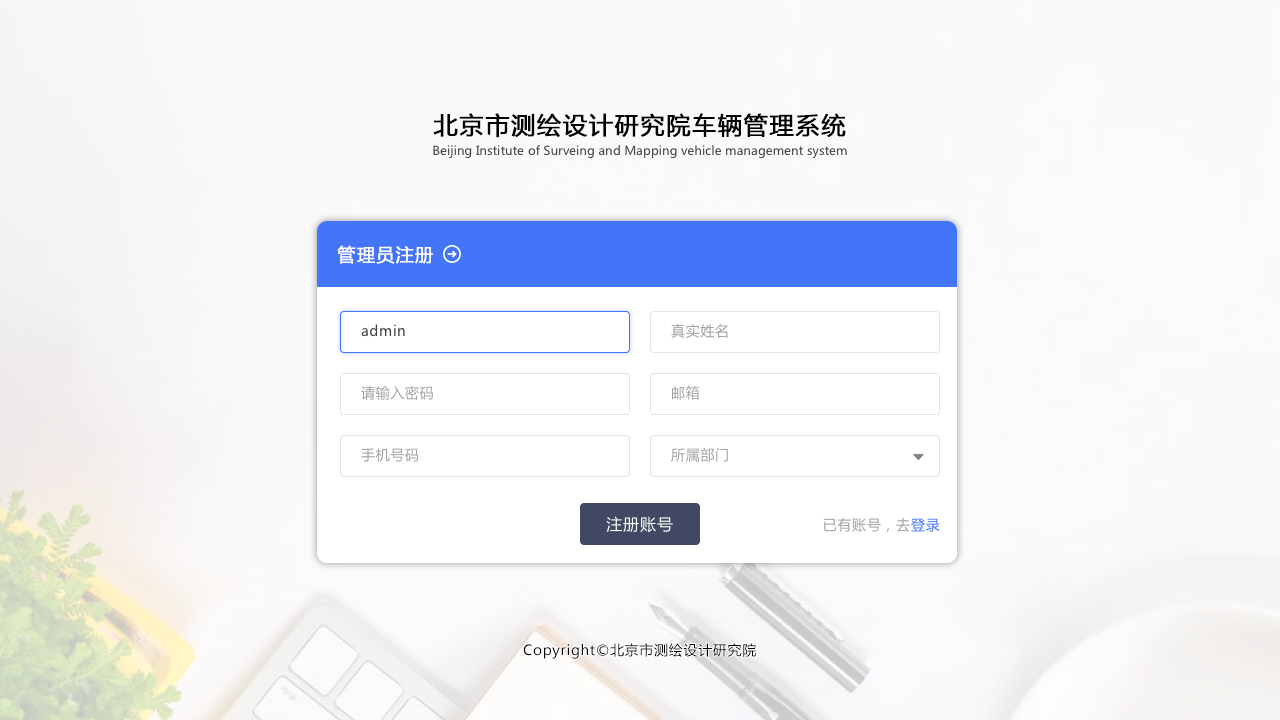
<style>
.page{position:relative;width:1280px;height:720px}
.page>*{position:absolute;margin:0}
.t1{font:24px "MicrosoftYaHei";letter-spacing:0.05em;color:#010101;font-weight:bold}
.t2{font:12.3px "MicrosoftYaHei";color:#454545}
.t3{font:18px "MicrosoftYaHei";letter-spacing:0.05em;color:#ffffff;font-weight:bold}
.t4{font:14px "MicrosoftYaHei";letter-spacing:0.05em;color:#444444}
.t5{font:14px "MicrosoftYaHei";letter-spacing:0.05em;color:#a2a2a2}
.t6{font:16px "MicrosoftYaHei";letter-spacing:0.05em;color:#ffffff}
.t7{font:14px "MicrosoftYaHei";letter-spacing:0.05em;color:#4275f8}
.t8{font:14px "MicrosoftYaHei";letter-spacing:0.05em;color:#000000}
</style>
<div class="page">
<p class="t1" style="left:433px;top:113px;width:413px;height:25px">北京市测绘设计研究院车辆管理系统</p>
<p class="t2" style="left:433px;top:145px;width:414px;height:14px">Beijing Institute of Surveing and Mapping vehicle management system</p>
<p class="t3" style="left:337px;top:245px;width:96px;height:19px">管理员注册</p>
<p class="t4" style="left:361px;top:324px;width:44px;height:13px">admin</p>
<p class="t5" style="left:671px;top:324px;width:57px;height:14px">真实姓名</p>
<p class="t5" style="left:361px;top:386px;width:72px;height:14px">请输入密码</p>
<p class="t5" style="left:672px;top:386px;width:28px;height:14px">邮箱</p>
<p class="t5" style="left:361px;top:448px;width:58px;height:14px">手机号码</p>
<p class="t5" style="left:671px;top:448px;width:57px;height:14px">所属部门</p>
<p class="t6" style="left:606px;top:516px;width:67px;height:17px">注册账号</p>
<p class="t5" style="left:823px;top:518px;width:117px;height:14px">已有账号，去<span class="t7">登录</span></p>
<p class="t8" style="left:523px;top:643px;width:233px;height:16px">Copyright©北京市测绘设计研究院</p>
</div>
